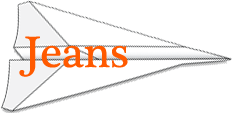
<style>
.page{position:relative;width:232px;height:113px;background:#ffffff}
.page>*{position:absolute;margin:0}
.t1{font:45px "PlantagenetCherokee";color:#ff5a00}
</style>
<div class="page">
<p class="t1" style="left:19px;top:36px;width:109px;height:41px">Jeans</p>
</div>
